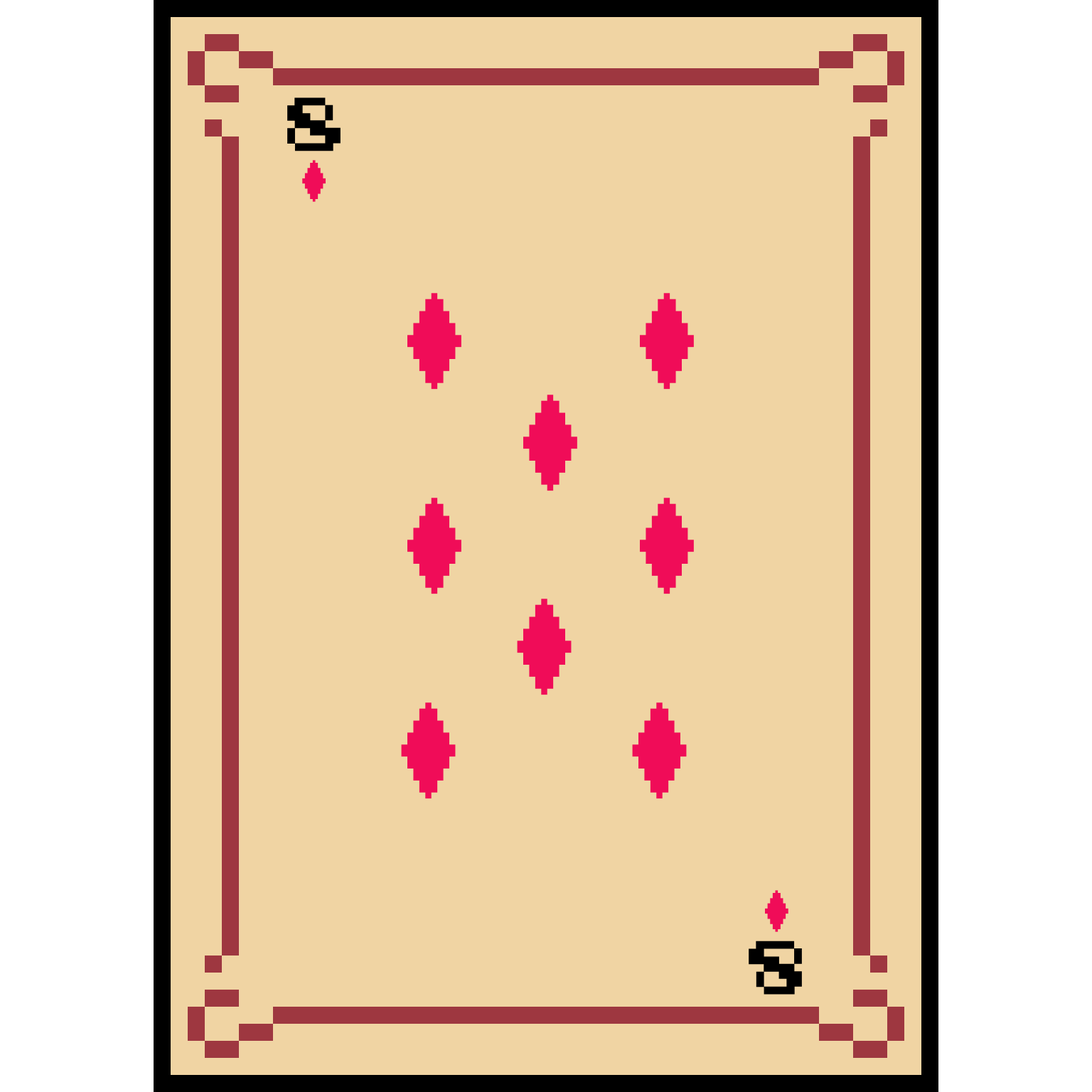
<style>
.page{position:relative;width:1092px;height:1092px;background:#f0d4a3}
.page>*{position:absolute;margin:0}
.t1{font:106.6px "ArcadeClassic";color:#000000}
</style>
<div class="page">
<p class="t1" style="left:287px;top:97px;width:54px;height:54px">8</p>
<p class="t1" style="left:749px;top:941px;width:53px;height:54px;rotate:180deg">8</p>
</div>
